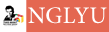
<style>
.page{position:relative;width:109px;height:32px;background:#e46751}
.page>*{position:absolute;margin:0}
.t1{font:24px "MinionPro-Medium";color:#ffffff}
</style>
<div class="page">
<p class="t1" style="left:28px;top:7px;width:79px;height:17px">NGLYU</p>
</div>
